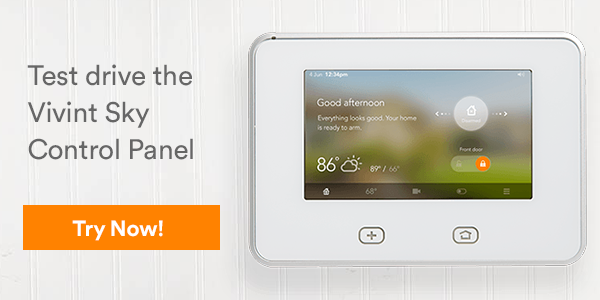
<style>
.page{position:relative;width:600px;height:300px}
.page>*{position:absolute;margin:0}
.t1{font:28px/37px "IntCircularPTT-Book";letter-spacing:-0.01em;color:#666666}
.t2{font:22px "IntCircularPTT-Bold";letter-spacing:-0.01em;color:#ffffff}
</style>
<div class="page">
<p class="t1" style="left:27px;top:64px;width:166px;height:96px">Test drive the Vivint Sky Control Panel</p>
<p class="t2" style="left:72px;top:220px;width:91px;height:21px">Try Now!</p>
</div>
